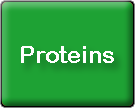
<style>
.page{position:relative;width:135px;height:108px;background:#1ea234}
.page>*{position:absolute;margin:0}
.t1{font:24px "ArialRoundedMTBold";color:#ffffff}
</style>
<div class="page">
<p class="t1" style="left:21px;top:46px;width:93px;height:17px">Proteins</p>
</div>
